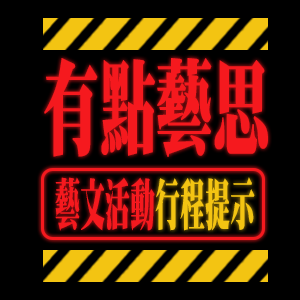
<style>
.page{position:relative;width:300px;height:300px;background:#000000}
.page>*{position:absolute;margin:0}
.t1{font:104.6px "DFMing-W12-WIN-BF";color:#f5191e;scale:0.54 1}
.t2{font:56px "DFMing-W12-WIN-BF";color:#f5191e;scale:0.45 1}
.t3{font:56px "DFMing-W12-WIN-BF";color:#f3c412;scale:0.45 1}
</style>
<div class="page">
<p class="t1" style="left:44px;top:58px;width:224px;height:99px">有點藝思</p>
<p class="t2" style="left:55px;top:177px;width:100px;height:54px">藝文活動</p>
<p class="t3" style="left:155px;top:177px;width:100px;height:54px">行程提示</p>
</div>
